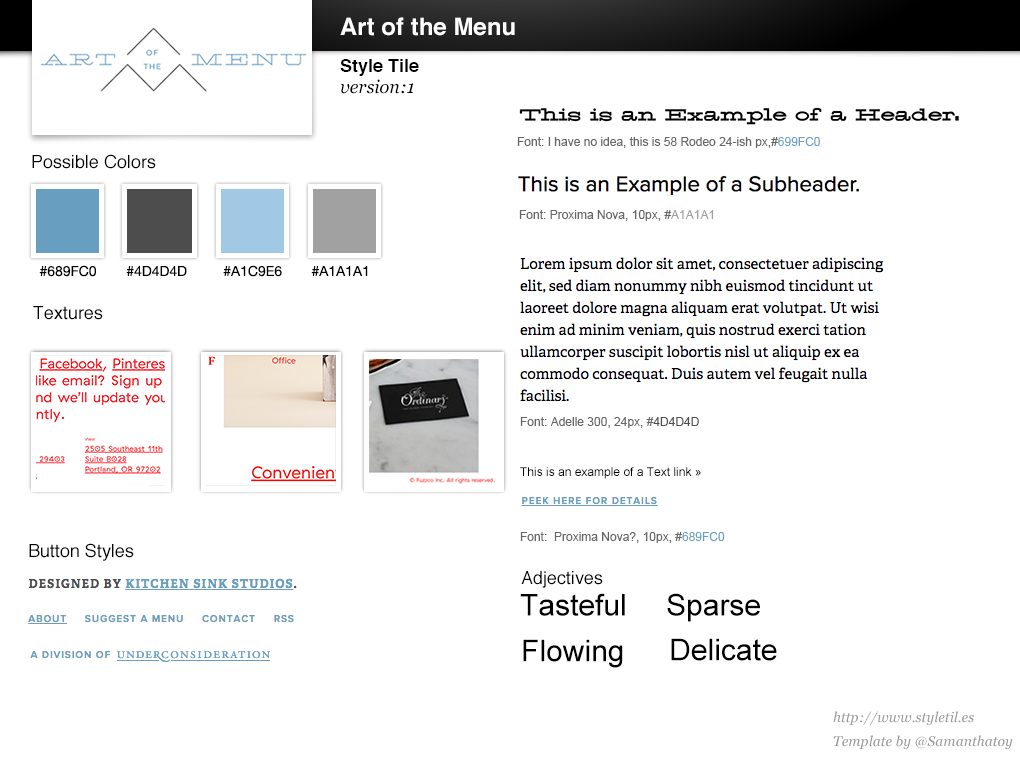
<style>
.page{position:relative;width:1020px;height:760px;background:#ffffff}
.page>*{position:absolute;margin:0}
.t1{font:24px "Helvetica-Bold";color:#ffffff}
.t2{font:18px "Helvetica-Bold";color:#000000}
.t3{font:18px "Georgia-Italic";color:#000000}
.t4{font:12px "ArialMT";color:#666666}
.t5{font:12px "ArialMT";color:#699fc0}
.t6{font:18px "Helvetica";color:#000000}
.t7{font:12px "ArialMT";color:#a1a1a1}
.t8{font:14px "HelveticaNeue";color:#000000}
.t9{font:12px "ArialMT";color:#4d4d4d}
.t10{font:12px "ArialMT";color:#000000}
.t11{font:12px "ArialMT";color:#689fc0}
.t12{font:30px "ArialMT";color:#000000}
.t13{font:14px/24px "Georgia-Italic";color:#999999}
</style>
<div class="page">
<p class="t1" style="left:340px;top:17px;width:175px;height:19px">Art of the Menu</p>
<p class="t2" style="left:340px;top:59px;width:79px;height:17px">Style Tile</p>
<p class="t3" style="left:340px;top:79px;width:74px;height:15px">version:1</p>
<p class="t4" style="left:517px;top:137px;width:303px;height:11px">Font: I have no idea, this is 58 Rodeo 24-ish px,#<span class="t5">699FC0</span></p>
<p class="t6" style="left:32px;top:154px;width:124px;height:15px">Possible Colors</p>
<p class="t4" style="left:519px;top:210px;width:195px;height:11px">Font: Proxima Nova, 10px, #<span class="t7">A1A1A1</span></p>
<p class="t8" style="left:39px;top:265px;width:57px;height:12px">#689FC0</p>
<p class="t8" style="left:126px;top:266px;width:61px;height:10px">#4D4D4D</p>
<p class="t8" style="left:223px;top:265px;width:59px;height:12px">#A1C9E6</p>
<p class="t8" style="left:311px;top:266px;width:57px;height:10px">#A1A1A1</p>
<p class="t6" style="left:33px;top:306px;width:70px;height:14px">Textures</p>
<p class="t4" style="left:520px;top:417px;width:179px;height:11px">Font: Adelle 300, 24px, #<span class="t9">4D4D4D</span></p>
<p class="t10" style="left:520px;top:467px;width:181px;height:12px">This is an example of a Text link »</p>
<p class="t4" style="left:520px;top:532px;width:205px;height:11px">Font:  Proxima Nova?, 10px, #<span class="t11">689FC0</span></p>
<p class="t6" style="left:29px;top:543px;width:105px;height:18px">Button Styles</p>
<p class="t6" style="left:521px;top:571px;width:82px;height:17px">Adjectives</p>
<p class="t12" style="left:520px;top:593px;width:105px;height:23px">Tasteful</p>
<p class="t12" style="left:667px;top:593px;width:93px;height:29px">Sparse</p>
<p class="t12" style="left:523px;top:639px;width:100px;height:29px">Flowing</p>
<p class="t12" style="left:671px;top:638px;width:106px;height:23px">Delicate</p>
<p class="t13" style="left:833px;top:711px;width:180px;height:38px">http://www.styletil.es<br>Template by @Samanthatoy</p>
</div>
